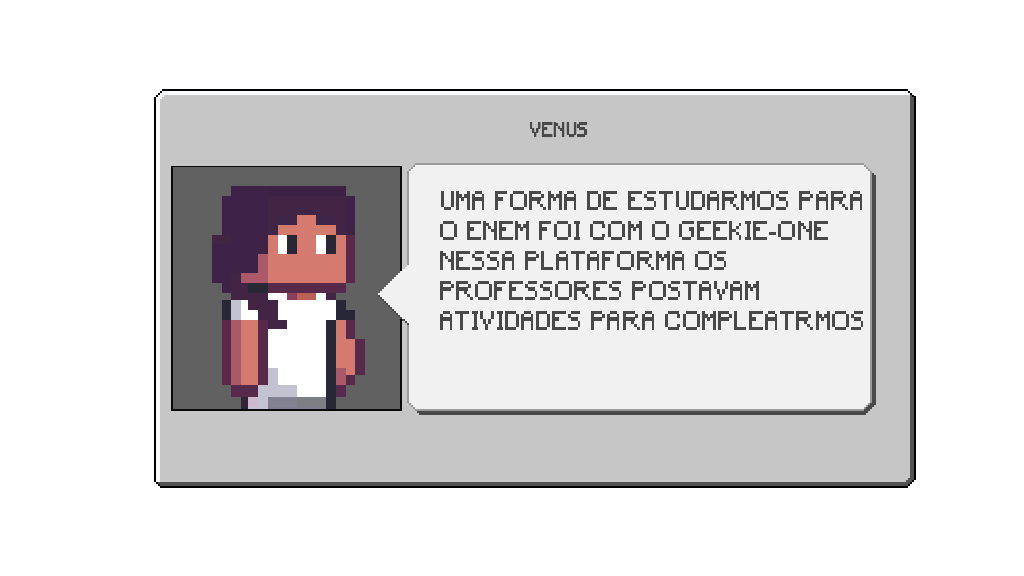
<style>
.page{position:relative;width:1024px;height:576px;background:#ffffff}
.page>*{position:absolute;margin:0}
.t1{font:19.6px "Minecraft";letter-spacing:0.02em;color:#494949;text-transform:uppercase;scale:0.86 1}
.t2{font:25.2px/30px "Minecraft";letter-spacing:0.05em;color:#494949;text-transform:uppercase;scale:0.86 1}
</style>
<div class="page">
<p class="t1" style="left:530px;top:122px;width:58px;height:16px">venus</p>
<p class="t2" style="left:440px;top:191px;width:423px;height:139px">uma forma de estudarmos para<br>o enem foi com o geekie-one<br>nessa plataforma os <br>professores postavam <br>atividades para compleatrmos</p>
</div>
